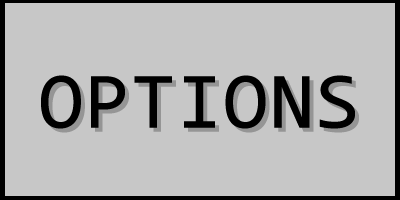
<style>
.page{position:relative;width:400px;height:200px;background:#c7c7c7}
.page>*{position:absolute;margin:0}
.t1{font:80px "Consolas";color:#000000;font-weight:bold}
.t2{font:80px "Consolas";font-weight:bold}
</style>
<div class="page">
<p class="t1" style="left:41px;top:75px;width:314px;height:54px">OPTIONS</p>
<p class="t2" style="left:45px;top:79px;width:314px;height:54px">OPTIONS</p>
</div>
